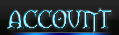
<style>
.page{position:relative;width:119px;height:35px}
.page>*{position:absolute;margin:0}
.t1{font:33.3px "Morpheus";font-variant:small-caps}
</style>
<div class="page">
<p class="t1" style="left:7px;top:8px;width:105px;height:26px">account</p>
</div>
